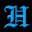
<style>
.page{position:relative;width:32px;height:32px;background:#000000}
.page>*{position:absolute;margin:0}
.t1{font:30px "holyunion";color:#00aaff}
</style>
<div class="page">
<p class="t1" style="left:4px;top:5px;width:25px;height:23px">H</p>
</div>
